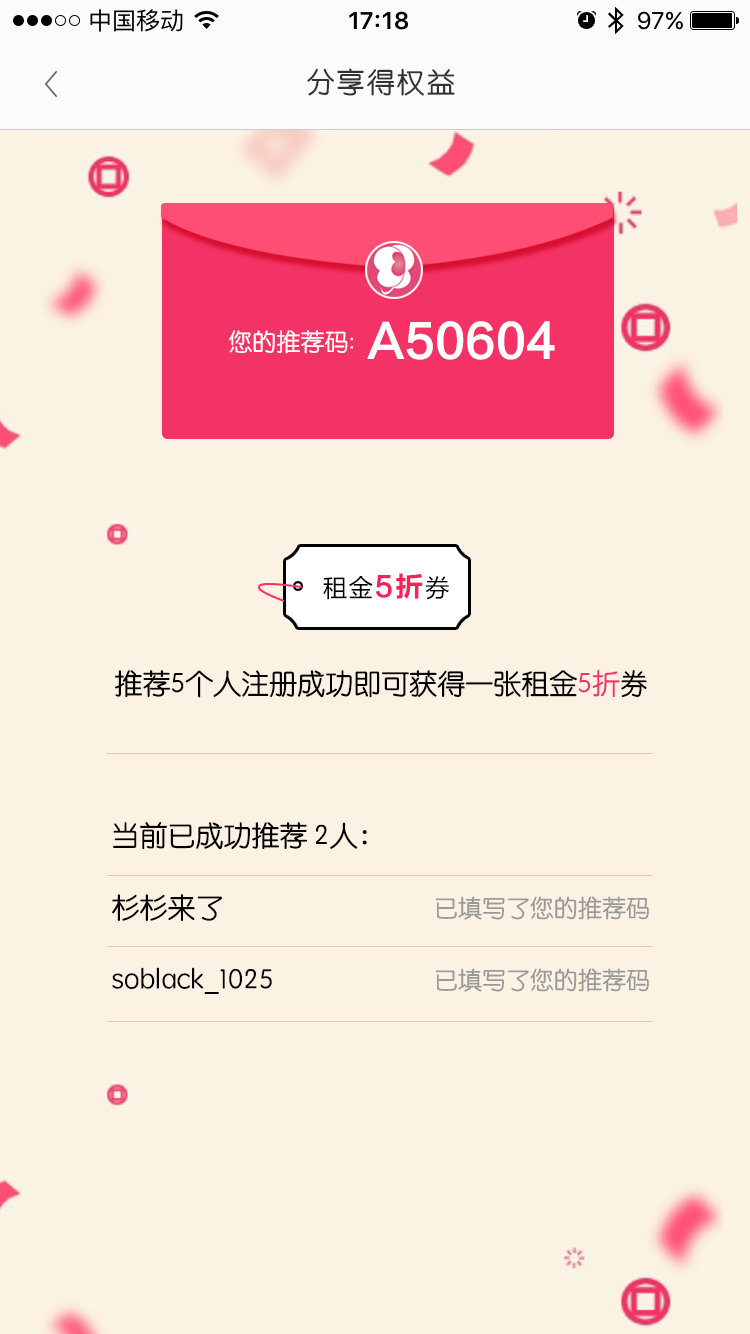
<style>
.page{position:relative;width:750px;height:1334px;background:#fcf2e4}
.page>*{position:absolute;margin:0}
.t1{font:28px "STYuanti-SC-Regular";letter-spacing:0.075em;color:#333333}
.t2{font:46.1px "FZLTCHK_ZJRB--GBK1-0";color:#ffffff}
.t3{font:24px "STYuanti-SC-Regular";color:#ffffff}
.t4{font:24px "MicrosoftYaHei";letter-spacing:0.075em;color:#000000}
.t5{font:28px "FZLTCHK_ZJRB--GBK1-0";letter-spacing:0.075em;color:#fc1f59}
.t6{font:28px "STYuanti-SC-Regular";color:#000000}
.t7{font:28px "STYuanti-SC-Regular";color:#f33265}
.t8{font:28px/36px "STYuanti-SC-Regular";color:#000000}
.t9{font:24px/36px "STYuanti-SC-Regular";color:#999999}
</style>
<div class="page">
<p class="t1" style="left:307px;top:68px;width:148px;height:28px">分享得权益</p>
<p class="t2" style="left:367px;top:321px;width:188px;height:39px">A50604</p>
<p class="t3" style="left:229px;top:330px;width:124px;height:24px">您的推荐码:</p>
<p class="t4" style="left:323px;top:573px;width:126px;height:27px">租金<span class="t5">5折</span>券</p>
<p class="t6" style="left:115px;top:670px;width:532px;height:28px">推荐5个人注册成功即可获得一张租金<span class="t7">5折</span>券</p>
<p class="t8" style="left:112px;top:822px;width:255px;height:172px">当前已成功推荐 2人：<br><br>杉杉来了<br><br>soblack_1025</p>
<p class="t9" style="left:435px;top:896px;width:214px;height:96px">已填写了您的推荐码<br><br>已填写了您的推荐码</p>
</div>
